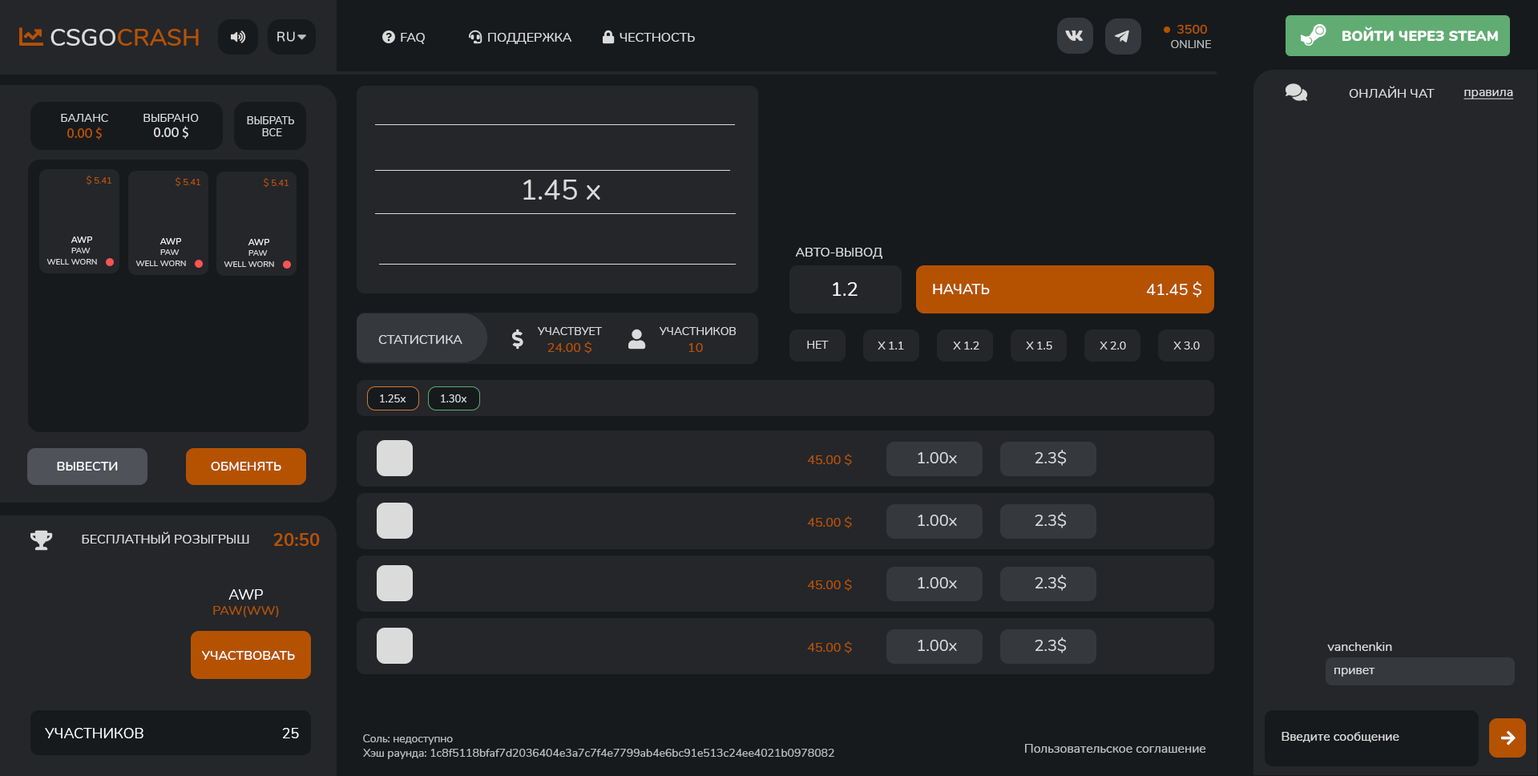
<style>
.page{position:relative;width:1538px;height:776px;background:#24262a}
.page>*{position:absolute;margin:0}
.t1{font:24px "Nunito-SemiBold";color:#b55202}
.t2{font:24px "Nunito-SemiBold";color:#dbdbdb}
.t3{font:12.8px "Nunito-SemiBold";color:#b55202}
.t4{font:14.4px "Nunito-Black";color:#ffffff}
.t5{font:11.2px "Nunito-Regular";color:#bbbcbc}
.t6{font:12.8px "Nunito-Regular";color:#dbdbdb}
.t7{font:12.8px "Nunito-Regular";color:#dbdbdb;text-decoration:underline}
.t8{font:11.2px "Nunito-Regular";color:#dbdbdb}
.t9{font:14.4px "MyriadPro-Regular";color:#dbdbdb}
.t10{font:10.4px "Nunito-Regular";color:#dbdbdb}
.t11{font:14.4px "MyriadPro-Regular";color:#b55202}
.t12{font:8.8px "Nunito-Regular";color:#b55202}
.t13{font:28.8px "Nunito-Regular";color:#dbdbdb}
.t14{font:8.8px "Nunito-Regular";color:#ffffff}
.t15{font:8px "Nunito-Regular";color:#dbdbdb}
.t16{font:16px "Nunito-Regular";color:#ffffff}
.t17{font:19.2px "Nunito-Regular";color:#ffffff}
.t18{font:14.4px "Nunito-SemiBold";color:#ffffff}
.t19{font:12.8px "Nunito-Regular";color:#b55202}
.t20{font:16px "Nunito-Regular";color:#dbdbdb}
.t21{font:12.8px "Nunito-SemiBold";color:#ffffff}
.t22{font:17.6px "Nunito-Bold";color:#b55202}
.t23{font:14.4px "Nunito-Regular";color:#ffffff}
.t24{font:12.8px "Nunito-Regular";color:#bbbcbc}
</style>
<div class="page">
<p class="t1" style="left:50px;top:29px;width:149px;height:17px"><span class="t2">CSGO</span>CRASH</p>
<p class="t3" style="left:1177px;top:25px;width:30px;height:9px">3500</p>
<p class="t4" style="left:1342px;top:26px;width:155px;height:16px">ВОЙТИ ЧЕРЕЗ STEAM</p>
<p class="t5" style="left:1171px;top:40px;width:40px;height:8px">ONLINE</p>
<p class="t6" style="left:1348px;top:86px;width:86px;height:12px">ОНЛАЙН ЧАТ</p>
<p class="t7" style="left:1463px;top:90px;width:50px;height:9px">правила</p>
<p class="t8" style="left:61px;top:114px;width:47px;height:8px">БАЛАНС</p>
<p class="t8" style="left:143px;top:114px;width:56px;height:8px">ВЫБРАНО</p>
<p class="t9" style="left:154px;top:126px;width:34px;height:13px">0.00 $</p>
<p class="t10" style="left:247px;top:116px;width:47px;height:20px;text-align:center">ВЫБРАТЬ <br>ВСЕ</p>
<p class="t11" style="left:67px;top:127px;width:35px;height:12px">0.00 $</p>
<p class="t12" style="left:87px;top:175px;width:24px;height:10px">$ 5.41</p>
<p class="t12" style="left:175px;top:177px;width:25px;height:10px">$ 5.41</p>
<p class="t12" style="left:264px;top:178px;width:24px;height:9px">$ 5.41</p>
<p class="t13" style="left:523px;top:179px;width:77px;height:20px">1.45 x</p>
<p class="t14" style="left:71px;top:236px;width:21px;height:7px">AWP</p>
<p class="t14" style="left:159px;top:238px;width:22px;height:6px">AWP</p>
<p class="t14" style="left:248px;top:239px;width:21px;height:6px">AWP</p>
<p class="t15" style="left:71px;top:248px;width:20px;height:5px">PAW</p>
<p class="t15" style="left:160px;top:249px;width:19px;height:6px">PAW</p>
<p class="t15" style="left:248px;top:250px;width:20px;height:6px">PAW</p>
<p class="t6" style="left:795px;top:248px;width:87px;height:11px">АВТО-ВЫВОД</p>
<p class="t15" style="left:46px;top:259px;width:51px;height:5px">WELL WORN</p>
<p class="t15" style="left:135px;top:260px;width:51px;height:6px">WELL WORN</p>
<p class="t15" style="left:224px;top:261px;width:50px;height:6px">WELL WORN</p>
<p class="t16" style="left:1146px;top:281px;width:55px;height:16px">41.45 $</p>
<p class="t17" style="left:832px;top:282px;width:25px;height:14px">1.2</p>
<p class="t18" style="left:933px;top:284px;width:56px;height:10px">НАЧАТЬ</p>
<p class="t8" style="left:538px;top:327px;width:64px;height:8px">УЧАСТВУЕТ</p>
<p class="t8" style="left:659px;top:327px;width:77px;height:8px">УЧАСТНИКОВ</p>
<p class="t6" style="left:378px;top:335px;width:84px;height:9px">СТАТИСТИКА</p>
<p class="t19" style="left:547px;top:341px;width:44px;height:12px">24.00 $</p>
<p class="t8" style="left:807px;top:341px;width:21px;height:8px">НЕТ</p>
<p class="t8" style="left:877px;top:341px;width:27px;height:8px">X 1.1</p>
<p class="t8" style="left:953px;top:341px;width:26px;height:8px">X 1.2</p>
<p class="t8" style="left:1026px;top:341px;width:26px;height:8px">X 1.5</p>
<p class="t8" style="left:1099px;top:341px;width:27px;height:8px">X 2.0</p>
<p class="t8" style="left:1173px;top:341px;width:26px;height:8px">X 3.0</p>
<p class="t19" style="left:688px;top:343px;width:15px;height:9px">10</p>
<p class="t10" style="left:380px;top:394px;width:25px;height:8px">1.25x</p>
<p class="t10" style="left:441px;top:394px;width:25px;height:8px">1.30x</p>
<p class="t20" style="left:1034px;top:449px;width:32px;height:16px">2.3$</p>
<p class="t21" style="left:57px;top:461px;width:61px;height:9px">ВЫВЕСТИ</p>
<p class="t21" style="left:211px;top:461px;width:70px;height:9px">ОБМЕНЯТЬ</p>
<p class="t19" style="left:807px;top:453px;width:45px;height:12px">45.00 $</p>
<p class="t20" style="left:917px;top:452px;width:40px;height:11px">1.00x</p>
<p class="t19" style="left:807px;top:516px;width:45px;height:12px">45.00 $</p>
<p class="t20" style="left:917px;top:514px;width:40px;height:12px">1.00x</p>
<p class="t20" style="left:1034px;top:512px;width:32px;height:16px">2.3$</p>
<p class="t6" style="left:82px;top:531px;width:167px;height:12px">БЕСПЛАТНЫЙ РОЗЫГРЫШ</p>
<p class="t22" style="left:273px;top:533px;width:47px;height:13px">20:50</p>
<p class="t19" style="left:807px;top:578px;width:45px;height:12px">45.00 $</p>
<p class="t20" style="left:917px;top:577px;width:40px;height:11px">1.00x</p>
<p class="t20" style="left:1034px;top:574px;width:32px;height:16px">2.3$</p>
<p class="t19" style="left:213px;top:589px;width:66px;height:28px;text-align:center"><span class="t23">AWP<br></span>PAW(WW)</p>
<p class="t19" style="left:807px;top:641px;width:45px;height:12px">45.00 $</p>
<p class="t20" style="left:917px;top:639px;width:40px;height:12px">1.00x</p>
<p class="t20" style="left:1034px;top:637px;width:32px;height:16px">2.3$</p>
<p class="t6" style="left:1327px;top:642px;width:65px;height:9px">vanchenkin</p>
<p class="t21" style="left:202px;top:651px;width:93px;height:8px">УЧАСТВОВАТЬ</p>
<p class="t6" style="left:1334px;top:667px;width:41px;height:9px">привет</p>
<p class="t23" style="left:45px;top:727px;width:98px;height:11px">УЧАСТНИКОВ</p>
<p class="t23" style="left:282px;top:727px;width:17px;height:11px">25</p>
<p class="t5" style="left:363px;top:734px;width:90px;height:10px">Соль: недоступно</p>
<p class="t6" style="left:1281px;top:731px;width:118px;height:11px">Введите сообщение</p>
<p class="t5" style="left:363px;top:748px;width:471px;height:11px">Хэш раунда: 1c8f5118bfaf7d2036404e3a7c7f4e7799ab4e6bc91e513c24ee4021b0978082</p>
<p class="t24" style="left:1025px;top:744px;width:181px;height:8px">Пользовательское соглашение</p>
</div>
